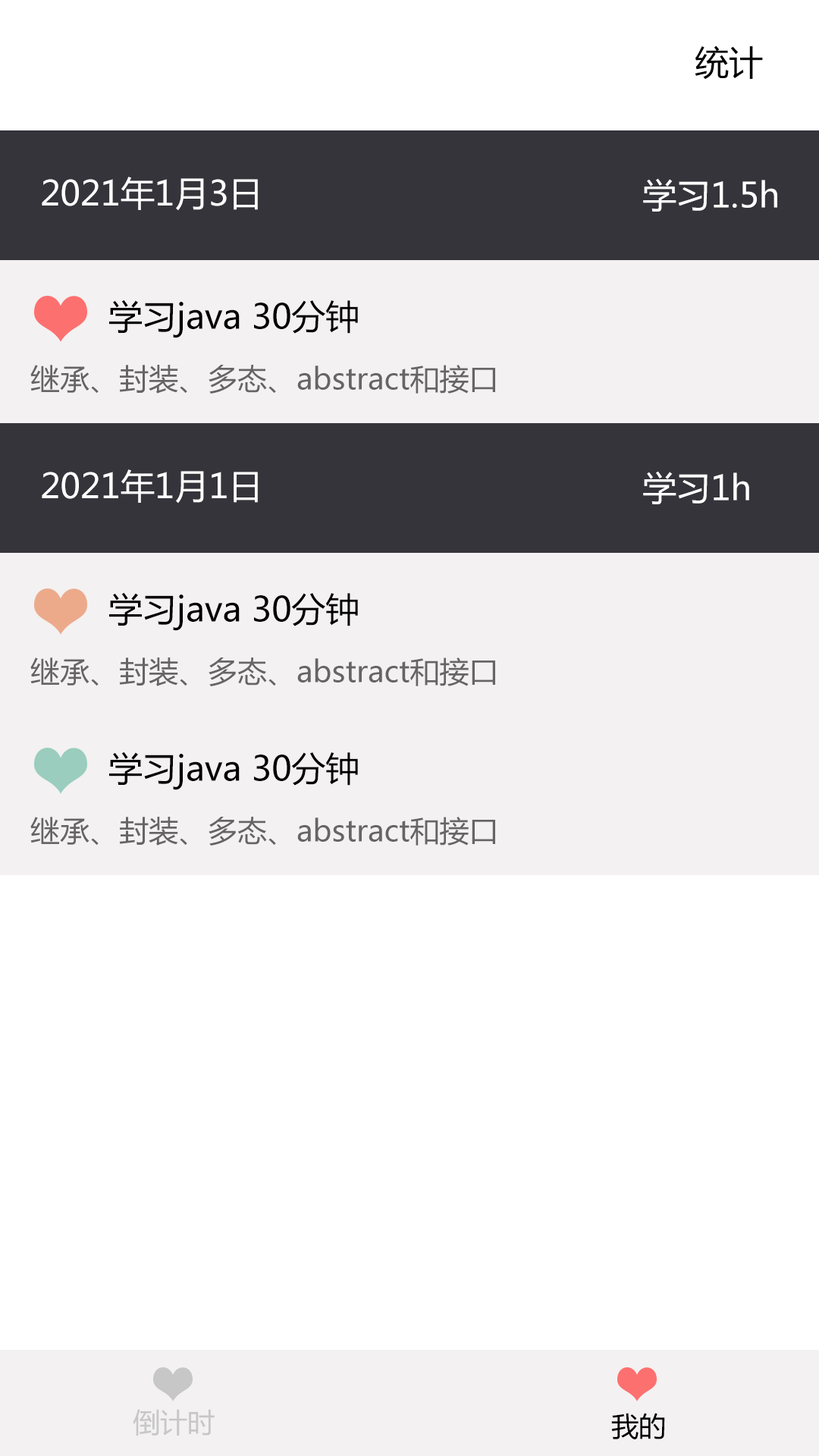
<style>
.page{position:relative;width:819px;height:1456px;background:#ffffff}
.page>*{position:absolute;margin:0}
.t1{font:34.1px "MicrosoftYaHei";color:#000000}
.t2{font:34.1px "MicrosoftYaHei";color:#ffffff}
.t3{font:29.6px "MicrosoftYaHei";color:#666464}
.t4{font:27.3px "MicrosoftYaHei";color:#c7c7c7}
.t5{font:27.3px "MicrosoftYaHei";color:#000000}
</style>
<div class="page">
<p class="t1" style="left:695px;top:45px;width:68px;height:35px">统计</p>
<p class="t2" style="left:42px;top:177px;width:216px;height:34px">2021年1月3日</p>
<p class="t2" style="left:643px;top:178px;width:134px;height:34px">学习1.5h</p>
<p class="t1" style="left:109px;top:300px;width:249px;height:38px">学习java 30分钟</p>
<p class="t3" style="left:30px;top:365px;width:465px;height:29px">继承、封装、多态、abstract和接口</p>
<p class="t2" style="left:42px;top:469px;width:216px;height:35px">2021年1月1日</p>
<p class="t2" style="left:643px;top:471px;width:106px;height:33px">学习1h</p>
<p class="t1" style="left:109px;top:592px;width:249px;height:39px">学习java 30分钟</p>
<p class="t3" style="left:30px;top:657px;width:465px;height:29px">继承、封装、多态、abstract和接口</p>
<p class="t1" style="left:109px;top:751px;width:249px;height:39px">学习java 30分钟</p>
<p class="t3" style="left:30px;top:817px;width:465px;height:29px">继承、封装、多态、abstract和接口</p>
<p class="t4" style="left:133px;top:1409px;width:82px;height:27px">倒计时</p>
<p class="t5" style="left:611px;top:1413px;width:54px;height:26px">我的</p>
</div>
